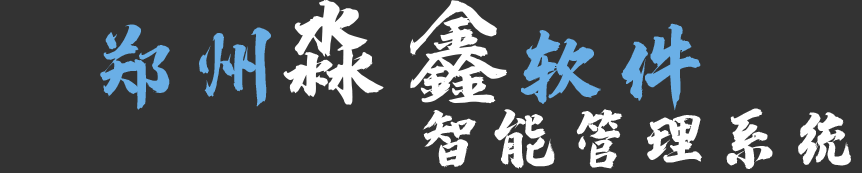
<style>
.page{position:relative;width:862px;height:173px;background:#333333}
.page>*{position:absolute;margin:0}
.t1{font:125px "zihun50hao-baigetianxingti";color:#ffffff}
.t2{font:100px "zihun50hao-baigetianxingti";color:#6aafe6}
.t3{font:75px "zihun50hao-baigetianxingti";color:#ffffff}
</style>
<div class="page">
<p class="t1" style="left:283px;top:0px;width:224px;height:105px">淼鑫</p>
<p class="t2" style="left:100px;top:24px;width:171px;height:86px">郑州</p>
<p class="t2" style="left:521px;top:23px;width:180px;height:88px">软件</p>
<p class="t3" style="left:422px;top:108px;width:429px;height:61px">智能管理系统</p>
</div>
